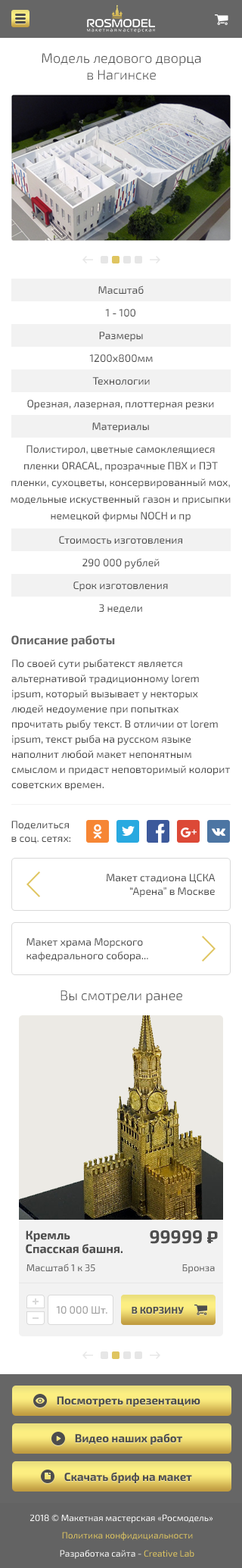
<style>
.page{position:relative;width:242px;height:1568px;background:#ffffff}
.page>*{position:absolute;margin:0}
.t1{font:13.6px "Exo2-Light";color:#4d4d4d}
.t2{font:10.6px "Exo2-Regular";color:#4d4d4d}
.t3{font:10.6px/16.7px "Exo2-Regular";color:#4d4d4d}
.t4{font:10.6px/22.7px "Exo2-Regular";color:#4d4d4d}
.t5{font:12.1px "Exo2-Bold";color:#666666}
.t6{font:10.6px/15.1px "Exo2-Regular";color:#4d4d4d}
.t7{font:10.6px/13.6px "Exo2-Regular";color:#4d4d4d}
</style>
<div class="page">
<p class="t1" style="left:42px;top:53px;width:159px;height:27px;text-align:center">Модель ледового дворца<br>в Нагинске</p>
<p class="t2" style="left:98px;top:285px;width:46px;height:10px">Масштаб</p>
<p class="t2" style="left:105px;top:309px;width:31px;height:8px">1 - 100</p>
<p class="t2" style="left:99px;top:332px;width:44px;height:9px">Размеры</p>
<p class="t2" style="left:89px;top:354px;width:64px;height:9px">1200х800мм</p>
<p class="t2" style="left:92px;top:377px;width:58px;height:8px">Технологии</p>
<p class="t2" style="left:27px;top:400px;width:187px;height:10px">Орезная, лазерная, плоттерная резки</p>
<p class="t2" style="left:92px;top:422px;width:57px;height:10px">Материалы</p>
<p class="t3" style="left:11px;top:445px;width:220px;height:77px;text-align:center"><span class="t4">Полистирол, цветные самоклеящиеся<br></span>пленки ORACAL, прозрачные ПВХ и ПЭТ<br>пленки, сухоцветы, консервированный мох,<br>модельные искуственный газон и присыпки<br>немецкой фирмы NOCH и пр</p>
<p class="t2" style="left:59px;top:536px;width:123px;height:8px">Стоимость изготовления</p>
<p class="t2" style="left:83px;top:558px;width:77px;height:11px">290 000 рублей</p>
<p class="t2" style="left:73px;top:581px;width:95px;height:10px">Срок изготовления</p>
<p class="t2" style="left:99px;top:604px;width:43px;height:9px">3 недели</p>
<p class="t5" style="left:11px;top:635px;width:104px;height:12px">Описание работы</p>
<p class="t6" style="left:11px;top:659px;width:219px;height:131px">По своей сути рыбатекст является альтернативой традиционному lorem ipsum, который вызывает у некторых людей недоумение при попытках прочитать рыбу текст. В отличии от lorem ipsum, текст рыба на русском языке наполнит любой макет непонятным смыслом и придаст неповторимый колорит советских времен.</p>
<p class="t7" style="left:11px;top:821px;width:59px;height:22px">Поделиться<br>в соц. сетях:</p>
<p class="t7" style="left:107px;top:874px;width:109px;height:23px;text-align:right">Макет стадиона ЦСКА<br>“Арена” в Москве</p>
<p class="t7" style="left:26px;top:938px;width:122px;height:24px">Макет храма Морского<br>кафедрального собора...</p>
<p class="t1" style="left:61px;top:990px;width:121px;height:13px">Вы смотрели ранее</p>
</div>
